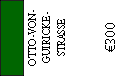
<style>
.page{position:relative;width:124px;height:76px;background:#ffffff}
.page>*{position:absolute;margin:0}
.t1{font:12px "AdobeDevanagari-Regular";color:#000000;scale:0.9 1}
.t2{font:14px "MyriadPro-Regular";color:#000000}
</style>
<div class="page">
<p class="t1" style="left:28px;top:10px;width:37px;height:56px;text-align:center;rotate:-90deg">OTTO-VON-<br>GUIRICKE-<br>STRASSE</p>
<p class="t2" style="left:105px;top:23px;width:10px;height:29px;rotate:-90deg">€300</p>
</div>
